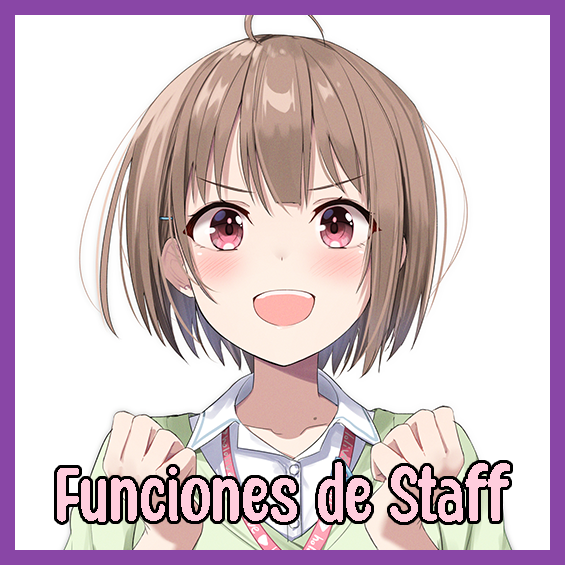
<style>
.page{position:relative;width:565px;height:565px;background:#ffffff}
.page>*{position:absolute;margin:0}
.t1{font:85.1px "HoneyNotes-Regular";color:#ffcddd}
</style>
<div class="page">
<p class="t1" style="left:57px;top:462px;width:453px;height:60px">Funciones de Staff</p>
</div>
